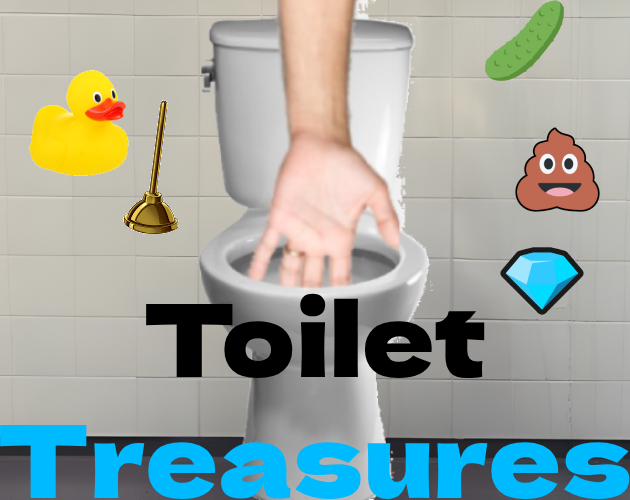
<style>
.page{position:relative;width:630px;height:500px}
.page>*{position:absolute;margin:0}
.t1{font:100.4px "DelaGothicOne-Regular";color:#00baff}
.t2{font:100.4px "DelaGothicOne-Regular";color:#000000}
</style>
<div class="page">
<p class="t1" style="left:0px;top:293px;width:630px;height:206px;text-align:center"><span class="t2">Toilet<br></span>Treasures</p>
</div>
